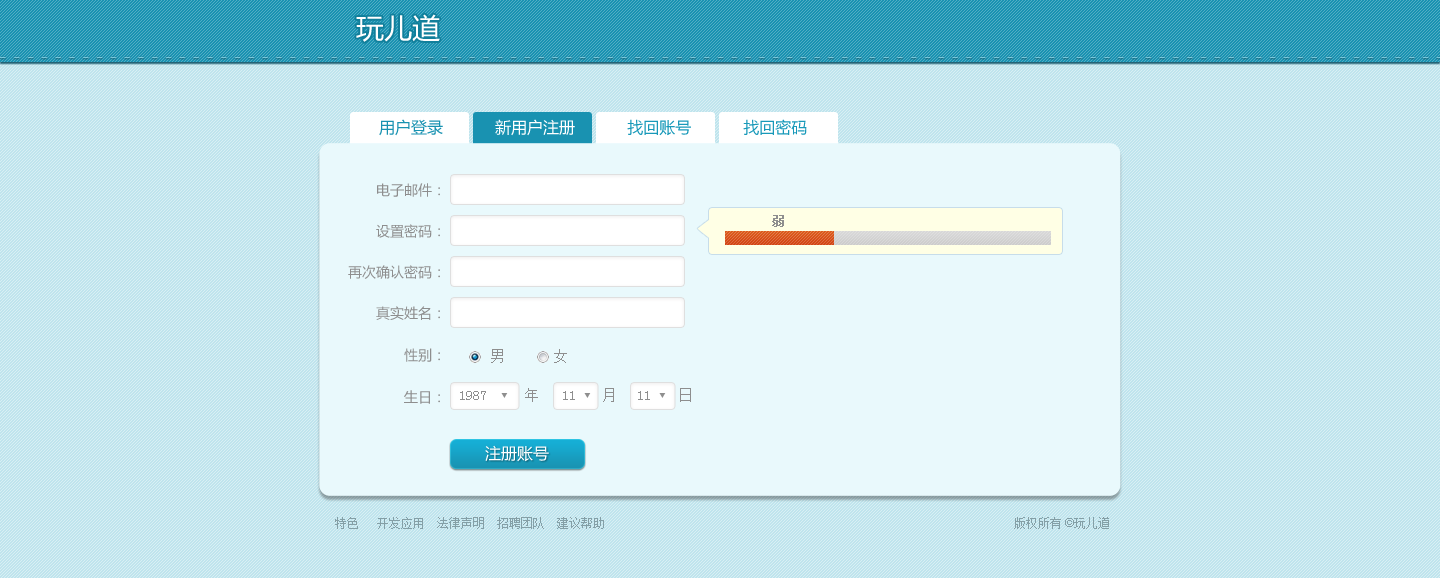
<style>
.page{position:relative;width:1440px;height:578px;background:#bfe4ed}
.page>*{position:absolute;margin:0}
.t1{font:28px "MicrosoftYaHei";color:#ffffff}
.t2{font:14px "MicrosoftYaHei";color:#8e8e8e}
.t3{font:12px "SimSun";color:#8e8e8e;font-weight:bold}
.t4{font:14px "SimSun";color:#8e8e8e}
.t5{font:16px "MicrosoftYaHei";color:#ffffff}
.t6{font:12px "SimSun";color:#849fa6}
.t7{font:12px "ArialMT";color:#849fa6}
</style>
<div class="page">
<p class="t1" style="left:356px;top:14px;width:84px;height:28px">玩儿道</p>
<p class="t2" style="left:377px;top:183px;width:63px;height:14px">电子邮件：</p>
<p class="t3" style="left:772px;top:215px;width:12px;height:12px">弱</p>
<p class="t2" style="left:376px;top:224px;width:64px;height:14px">设置密码：</p>
<p class="t2" style="left:348px;top:265px;width:92px;height:14px">再次确认密码：</p>
<p class="t2" style="left:376px;top:306px;width:64px;height:14px">真实姓名：</p>
<p class="t2" style="left:404px;top:348px;width:36px;height:14px">性别：</p>
<p class="t4" style="left:491px;top:349px;width:76px;height:14px">男       女</p>
<p class="t2" style="left:404px;top:390px;width:36px;height:14px">生日：</p>
<p class="t4" style="left:525px;top:388px;width:166px;height:14px">年         月         日</p>
<p class="t4" style="left:460px;top:391px;width:26px;height:9px">1987</p>
<p class="t4" style="left:563px;top:391px;width:12px;height:9px">11</p>
<p class="t4" style="left:638px;top:391px;width:12px;height:9px">11</p>
<p class="t5" style="left:485px;top:445px;width:64px;height:17px">注册账号</p>
<p class="t6" style="left:335px;top:517px;width:269px;height:12px">特色   开发应用  法律声明  招聘团队  建议帮助</p>
<p class="t6" style="left:1014px;top:517px;width:95px;height:12px">版权所有<span class="t7"> ©</span>玩儿道</p>
</div>
